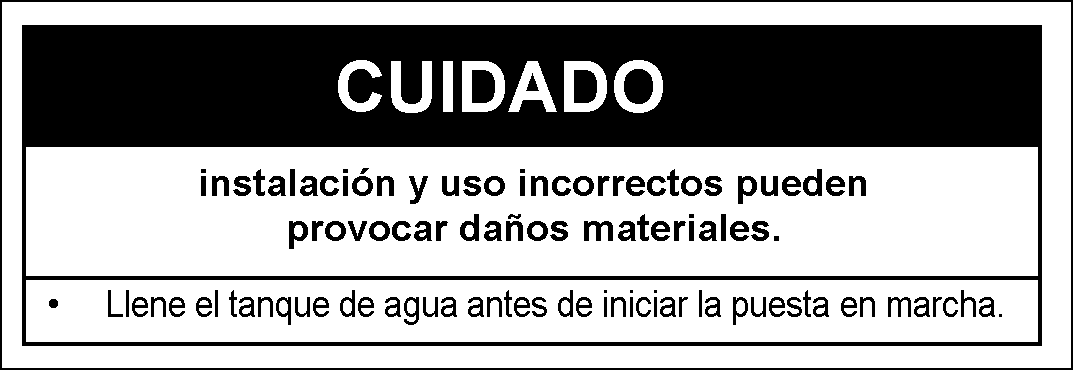
<style>
.page{position:relative;width:1073px;height:370px;background:#ffffff}
.page>*{position:absolute;margin:0}
.t1{font:70.8px "Arial-BoldMT";color:#ffffff}
.t2{font:37.5px "Arial-BoldMT";color:#000000}
.t3{font:37.5px "ArialMT";color:#000000;scale:0.9 1}
.t4{font:37.5px "ArialMT";color:#000000}
</style>
<div class="page">
<p class="t1" style="left:338px;top:60px;width:325px;height:53px">CUIDADO</p>
<p class="t2" style="left:201px;top:168px;width:665px;height:81px;text-align:center">instalación y uso incorrectos pueden provocar daños materiales.</p>
<p class="t3" style="left:49px;top:290px;width:953px;height:35px"><span class="t4">• </span>Llene el tanque de agua antes de iniciar la puesta en marcha<span class="t4">.</span></p>
</div>
